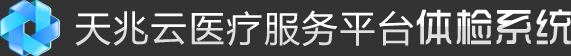
<style>
.page{position:relative;width:571px;height:56px;background:#333333}
.page>*{position:absolute;margin:0}
.t1{font:36px "MicrosoftYaHei";letter-spacing:0.05em;color:#f0f0f0}
.t2{font:41.8px "TRENDS";letter-spacing:0.05em;scale:0.91 1}
</style>
<div class="page">
<p class="t1" style="left:75px;top:10px;width:339px;height:37px">天兆云医疗服务平台</p>
<p class="t2" style="left:416px;top:9px;width:155px;height:36px">体检系统</p>
</div>
